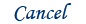
<style>
.page{position:relative;width:86px;height:24px;background:#ffffff}
.page>*{position:absolute;margin:0}
.t1{font:23px "MonotypeCorsiva";color:#003371}
</style>
<div class="page">
<p class="t1" style="left:14px;top:3px;width:58px;height:18px">Cancel</p>
</div>
